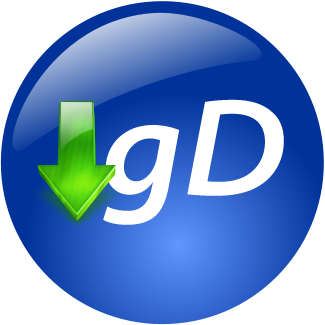
<style>
.page{position:relative;width:325px;height:325px;background:#ffffff}
.page>*{position:absolute;margin:0}
.t1{font:140px "MyriadPro-SemiboldSemiExtIt";color:#ffffff}
</style>
<div class="page">
<p class="t1" style="left:103px;top:99px;width:181px;height:126px">gD</p>
</div>
